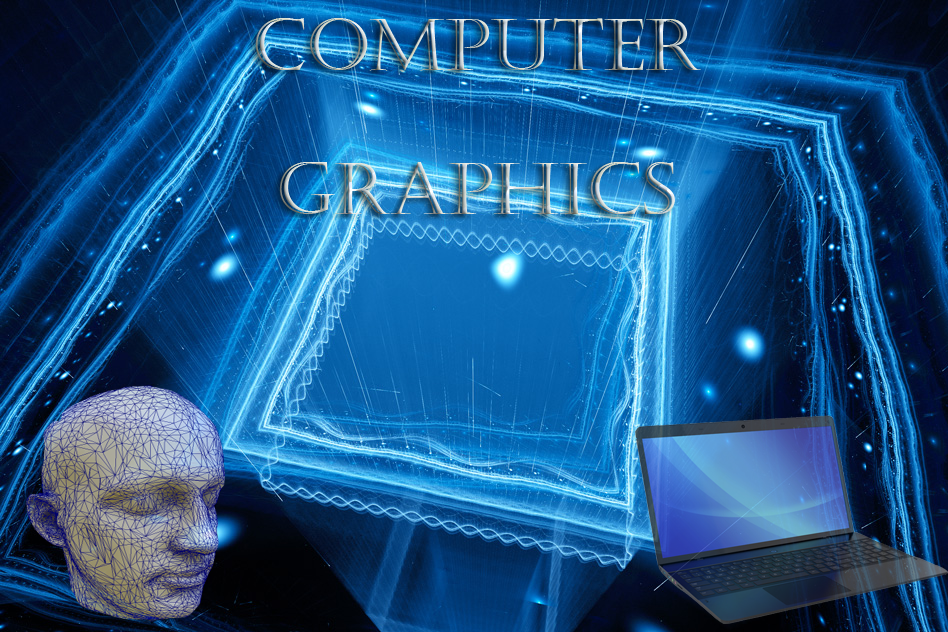
<style>
.page{position:relative;width:948px;height:632px}
.page>*{position:absolute;margin:0}
.t1{font:72px/72px "Castellar"}
</style>
<div class="page">
<p class="t1" style="left:255px;top:18px;width:446px;height:196px;text-align:center">Computer<br><br>Graphics</p>
</div>
